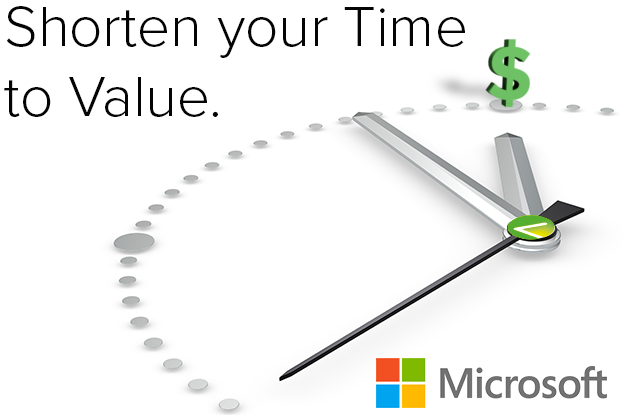
<style>
.page{position:relative;width:626px;height:415px;background:#ffffff}
.page>*{position:absolute;margin:0}
.t1{font:58.3px "ProximaNova-Light";color:#040404}
</style>
<div class="page">
<p class="t1" style="left:4px;top:6px;width:461px;height:111px">Shorten your Time to Value.</p>
</div>
